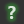
<style>
.page{position:relative;width:24px;height:24px;background:#333333}
.page>*{position:absolute;margin:0}
.t1{font:18px "SegoeUI-Bold";color:#d9e5d9}
</style>
<div class="page">
<p class="t1" style="left:8px;top:6px;width:8px;height:13px">?</p>
</div>
